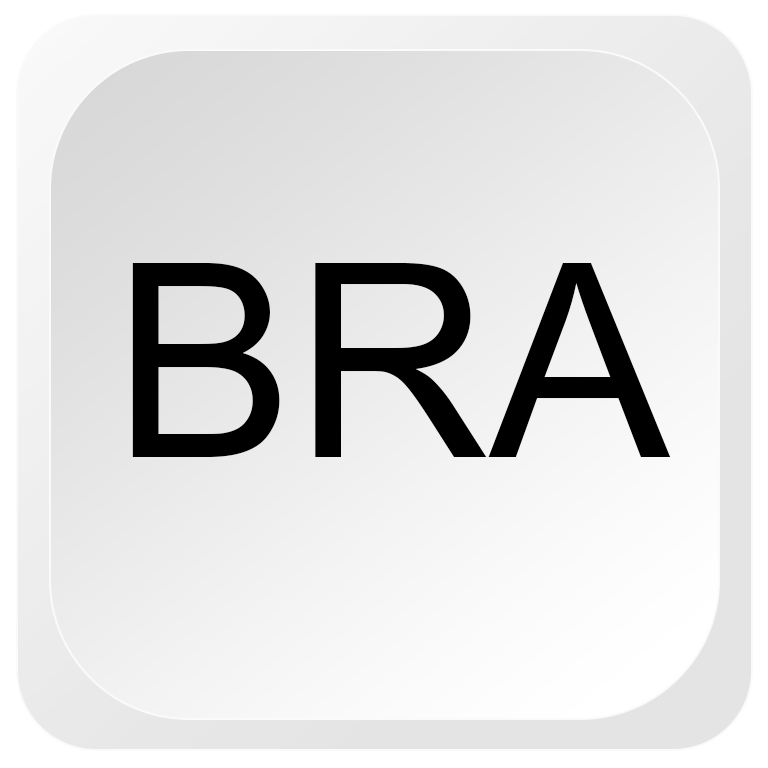
<style>
.page{position:relative;width:768px;height:768px}
.page>*{position:absolute;margin:0}
.t1{font:271px "ArialMT";color:#000000}
</style>
<div class="page">
<p class="t1" style="left:132px;top:263px;width:539px;height:194px">BRA</p>
</div>
